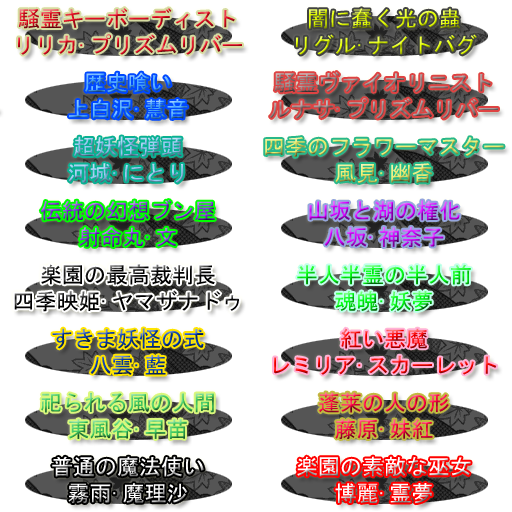
<style>
.page{position:relative;width:512px;height:512px;background:#ffffff}
.page>*{position:absolute;margin:0}
.t1{font:22px "MS-Gothic"}
</style>
<div class="page">
<p class="t1" style="left:18px;top:8px;width:224px;height:47px;text-align:center">騒霊キーボーディスト<br>リリカ·プリズムリバー</p>
<p class="t1" style="left:296px;top:8px;width:181px;height:47px;text-align:center">闇に蠢く光の蟲<br>リグル·ナイトバグ</p>
<p class="t1" style="left:68px;top:136px;width:116px;height:47px;text-align:center">超妖怪弾頭<br>河城·にとり</p>
<p class="t1" style="left:40px;top:200px;width:175px;height:47px;text-align:center">伝統の幻想ブン屋<br>射命丸·文</p>
<p class="t1" style="left:309px;top:200px;width:151px;height:47px;text-align:center">山坂と湖の権化<br>八坂·神奈子</p>
<p class="t1" style="left:14px;top:264px;width:225px;height:48px;text-align:center">楽園の最高裁判長<br>四季映姫·ヤマザナドゥ</p>
<p class="t1" style="left:297px;top:264px;width:174px;height:48px;text-align:center">半人半霊の半人前<br>魂魄·妖夢</p>
<p class="t1" style="left:52px;top:328px;width:152px;height:47px;text-align:center">すきま妖怪の式<br>八雲·藍</p>
<p class="t1" style="left:274px;top:328px;width:223px;height:47px;text-align:center">紅い悪魔<br>レミリア·スカーレット</p>
<p class="t1" style="left:41px;top:393px;width:173px;height:46px;text-align:center">祀られる風の人間<br>東風谷·早苗</p>
<p class="t1" style="left:319px;top:392px;width:130px;height:47px;text-align:center">蓬莱の人の形<br>藤原·妹紅</p>
<p class="t1" style="left:52px;top:456px;width:152px;height:47px;text-align:center">普通の魔法使い<br>霧雨·魔理沙</p>
<p class="t1" style="left:297px;top:456px;width:174px;height:48px;text-align:center">楽園の素敵な巫女<br>博麗·霊夢</p>
</div>
